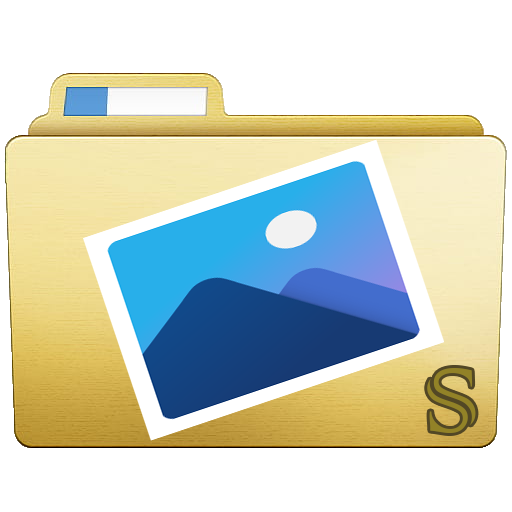
<style>
.page{position:relative;width:512px;height:512px;background:#ffffff}
.page>*{position:absolute;margin:0}
.t1{font:122px "ColonnaMT";color:#928227}
</style>
<div class="page">
<p class="t1" style="left:427px;top:368px;width:49px;height:65px">S</p>
</div>
